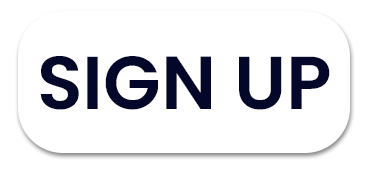
<style>
.page{position:relative;width:373px;height:169px;background:#ffffff}
.page>*{position:absolute;margin:0}
.t1{font:75px "Poppins-SemiBold";color:#03072a;text-transform:uppercase}
</style>
<div class="page">
<p class="t1" style="left:40px;top:56px;width:290px;height:54px">SIGN UP</p>
</div>
